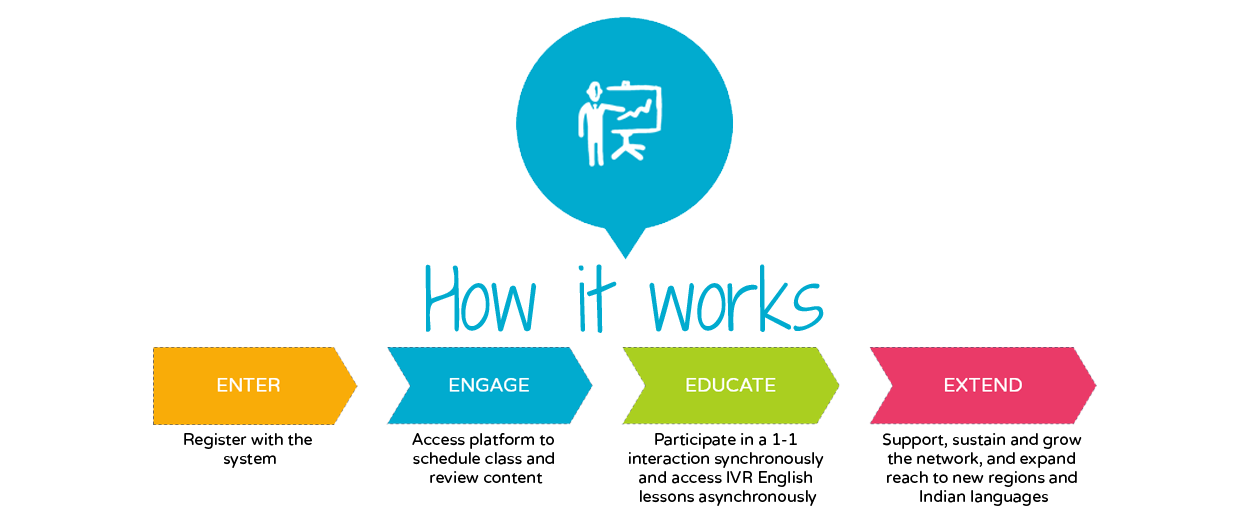
<style>
.page{position:relative;width:1250px;height:516px;background:#ffffff}
.page>*{position:absolute;margin:0}
.t1{font:80px "ShadowsIntoLight";color:#01abcf}
.t2{font:16px "VarelaRound";color:#000000}
</style>
<div class="page">
<p class="t1" style="left:425px;top:264px;width:399px;height:69px">How it works</p>
<p class="t2" style="left:184px;top:433px;width:128px;height:35px;text-align:center">Register with the <br>system</p>
<p class="t2" style="left:412px;top:433px;width:142px;height:51px;text-align:center">Access platform to <br>schedule class and <br>review content</p>
<p class="t2" style="left:629px;top:433px;width:195px;height:73px;text-align:center">Participate in a 1-1 <br>interaction synchronously <br>and access IVR English <br>lessons asynchronously</p>
<p class="t2" style="left:882px;top:433px;width:200px;height:73px;text-align:center">Support, sustain and grow <br>the network, and expand <br>reach to new regions and <br>Indian languages</p>
</div>
